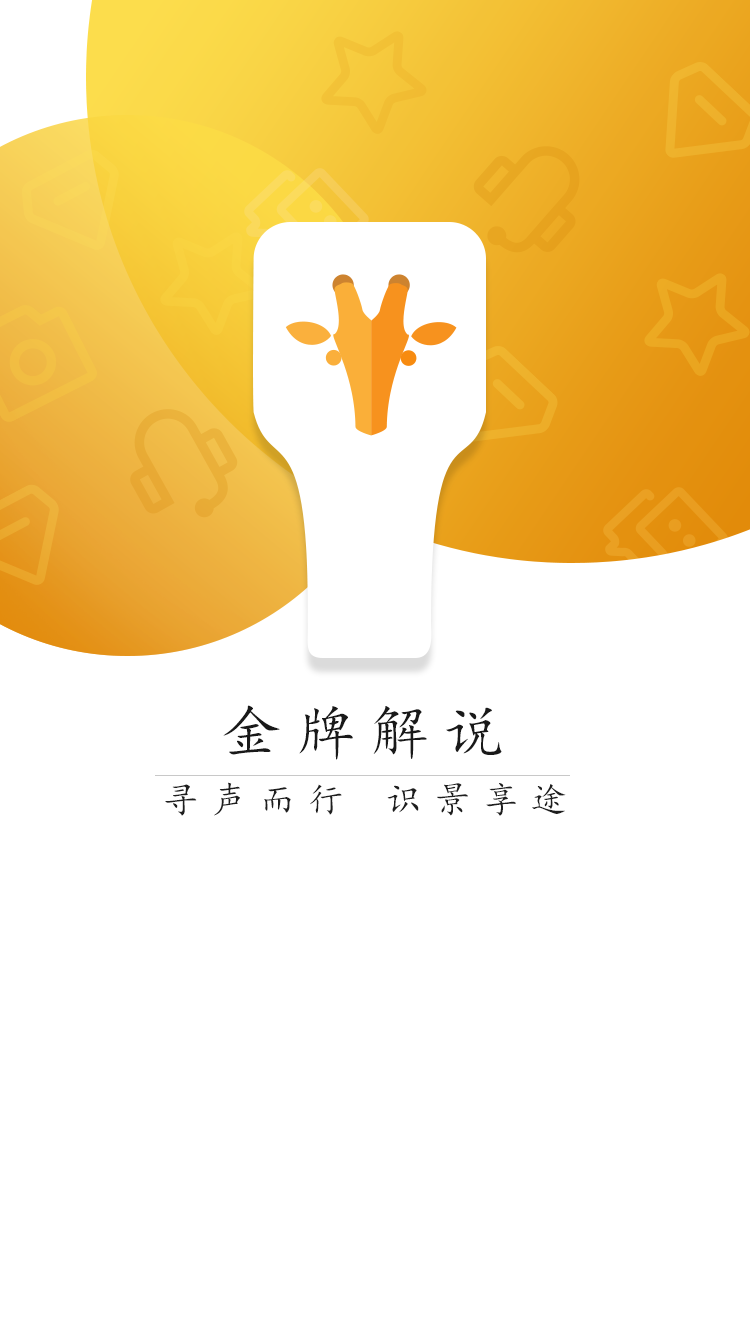
<style>
.page{position:relative;width:750px;height:1334px;background:#ffffff}
.page>*{position:absolute;margin:0}
.t1{font:60px "KaiTi";letter-spacing:0.24em;color:#191919;text-transform:uppercase}
.t2{font:36px "KaiTi";letter-spacing:0.34em;color:#1e1e1e;text-transform:uppercase}
</style>
<div class="page">
<p class="t1" style="left:223px;top:705px;width:279px;height:55px">金牌解说</p>
<p class="t2" style="left:165px;top:782px;width:401px;height:34px">寻声而行 识景享途</p>
</div>
